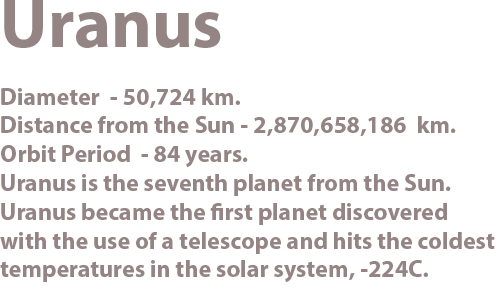
<style>
.page{position:relative;width:500px;height:298px;background:#ffffff}
.page>*{position:absolute;margin:0}
.t1{font:24px "MyriadHebrew-Bold";color:#887777}
.t2{font:70px "MyriadHebrew-Bold";color:#887777}
</style>
<div class="page">
<p class="t1" style="left:0px;top:0px;width:495px;height:282px;text-align:right;opacity:0.9"><span class="t2">Uranus<br></span><br>Diameter  - 50,724 km.<br>Distance from the Sun - 2,870,658,186  km.<br>Orbit Period  - 84 years.<br>Uranus is the seventh planet from the Sun.<br>Uranus became the first planet discovered<br>with the use of a telescope and hits the coldest<br>temperatures in the solar system, -224C.</p>
</div>
